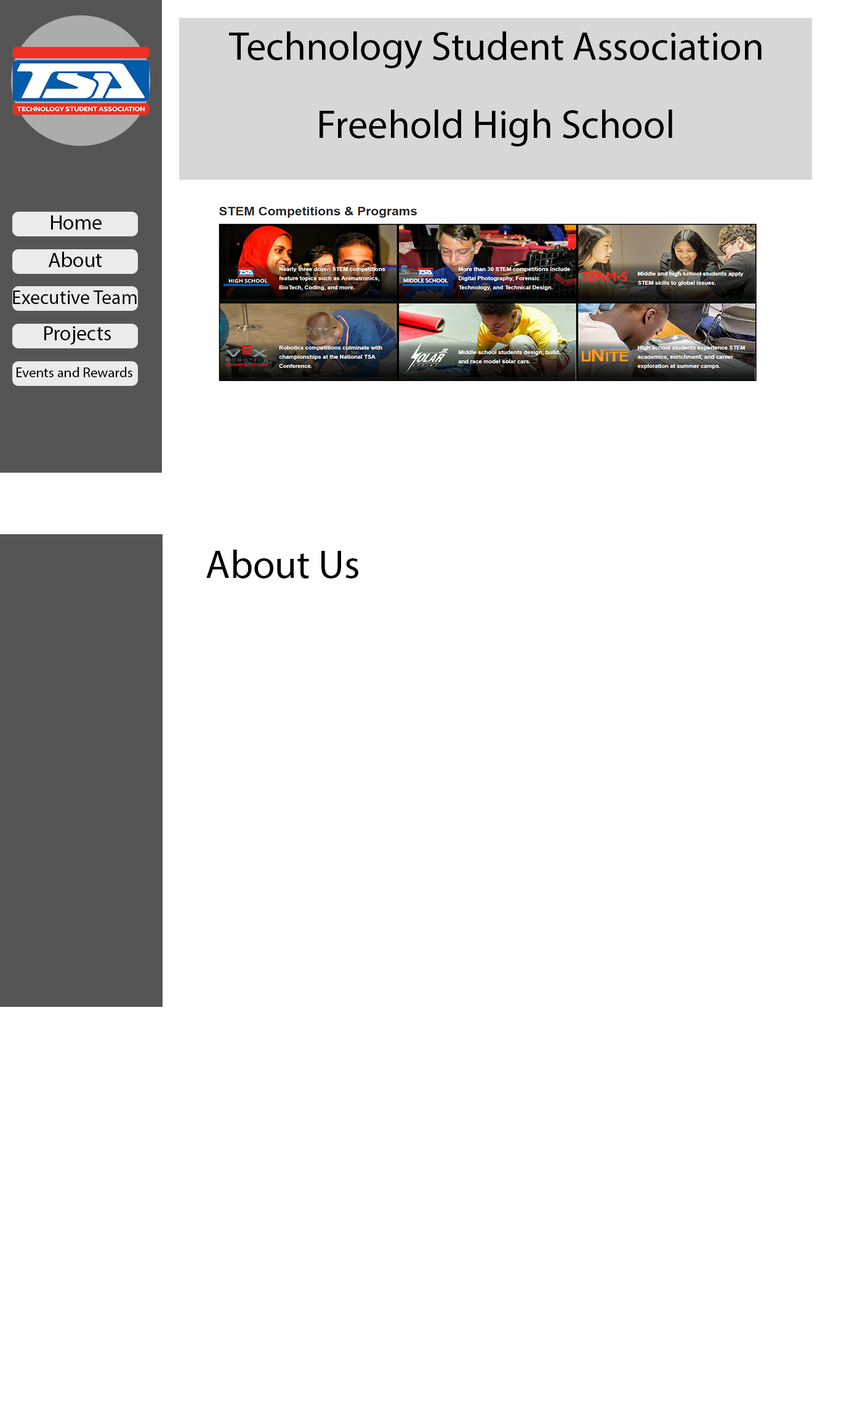
<style>
.page{position:relative;width:841px;height:1418px;background:#ffffff}
.page>*{position:absolute;margin:0}
.t1{font:40px "MyriadPro-Regular";color:#000000}
.t2{font:20.9px "MyriadPro-Regular";color:#000000}
.t3{font:19.7px "MyriadPro-Regular";color:#000000}
.t4{font:14.2px "MyriadPro-Regular";color:#000000}
</style>
<div class="page">
<p class="t1" style="left:229px;top:31px;width:532px;height:38px">Technology Student Association</p>
<p class="t1" style="left:319px;top:110px;width:353px;height:36px">Freehold High School</p>
<p class="t2" style="left:51px;top:215px;width:51px;height:15px">Home</p>
<p class="t2" style="left:48px;top:252px;width:54px;height:15px">About</p>
<p class="t3" style="left:13px;top:291px;width:124px;height:13px">Executive Team</p>
<p class="t2" style="left:44px;top:326px;width:67px;height:19px">Projects</p>
<p class="t4" style="left:16px;top:367px;width:116px;height:10px">Events and Rewards</p>
<p class="t1" style="left:206px;top:550px;width:152px;height:29px">About Us</p>
</div>
